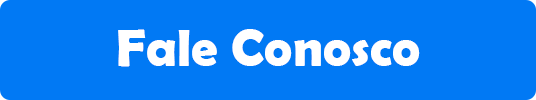
<style>
.page{position:relative;width:536px;height:100px;background:#0179f4}
.page>*{position:absolute;margin:0}
.t1{font:53.3px "BerlinSansFBDemi-Bold";color:#ffffff}
</style>
<div class="page">
<p class="t1" style="left:118px;top:29px;width:302px;height:38px">Fale Conosco</p>
</div>
